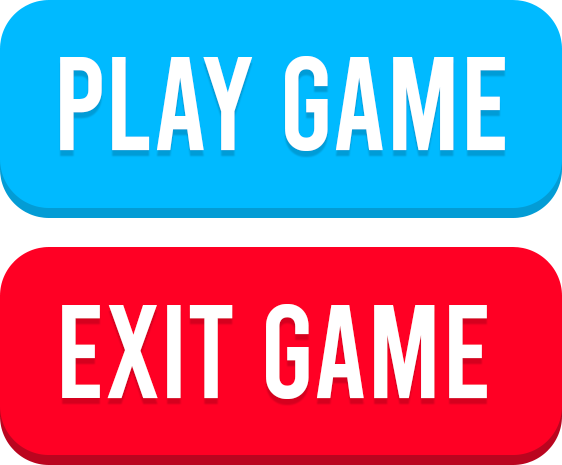
<style>
.page{position:relative;width:562px;height:465px;background:#00baff}
.page>*{position:absolute;margin:0}
.t1{font:131.9px "Bebas-Regular";color:#ffffff;scale:0.95 1}
.t2{font:132.2px "Bebas-Regular";color:#ffffff;scale:0.94 1}
</style>
<div class="page">
<p class="t1" style="left:60px;top:56px;width:445px;height:95px">Play Game</p>
<p class="t2" style="left:62px;top:304px;width:425px;height:95px">Exit Game</p>
</div>
